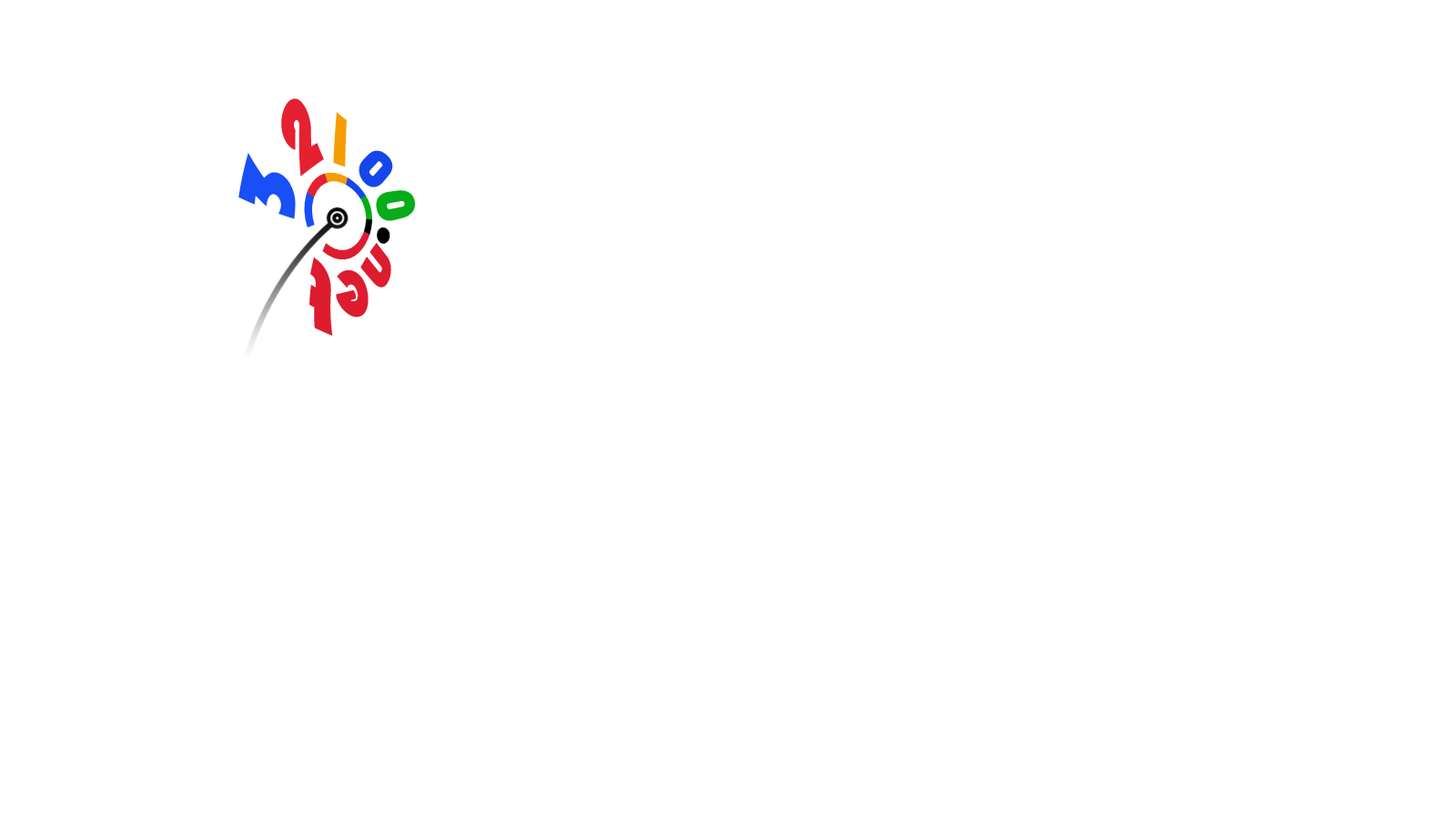
<style>
.page{position:relative;width:1456px;height:819px;background:#ffffff}
.page>*{position:absolute;margin:0}
.t1{font:55px "Bauhaus93";letter-spacing:-0.1em;color:#dd1c30;text-decoration:underline}
.t2{font:55px "Bauhaus93";letter-spacing:-0.1em;color:#184ff6;text-decoration:underline}
.t3{font:55px "Bauhaus93";letter-spacing:-0.1em;color:#e52031;text-decoration:underline}
.t4{font:55px "Bauhaus93";letter-spacing:-0.1em;color:#f79d04;text-decoration:underline}
.t5{font:55px "Bauhaus93";letter-spacing:-0.1em;color:#1546ec;text-decoration:underline}
.t6{font:55px "Bauhaus93";letter-spacing:-0.1em;color:#06ac19;text-decoration:underline}
.t7{font:55px "Bauhaus93";letter-spacing:-0.1em;color:#000000;text-decoration:underline}
</style>
<div class="page">
<p class="t1" style="left:238px;top:98px;width:177px;height:238px;rotate:-105deg"><span class="t2">3</span><span class="t3">2</span><span class="t4">1</span><span class="t5">0</span><span class="t6">0</span><span class="t7">.</span>net</p>
</div>
